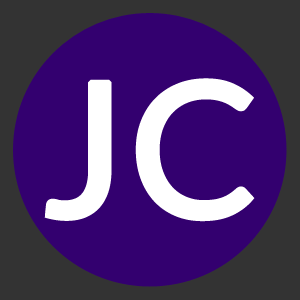
<style>
.page{position:relative;width:300px;height:300px;background:#33006f}
.page>*{position:absolute;margin:0}
.t1{font:187.5px "Lato-Regular";color:#ffffff;font-weight:bold}
</style>
<div class="page">
<p class="t1" style="left:44px;top:78px;width:211px;height:144px">JC</p>
</div>
